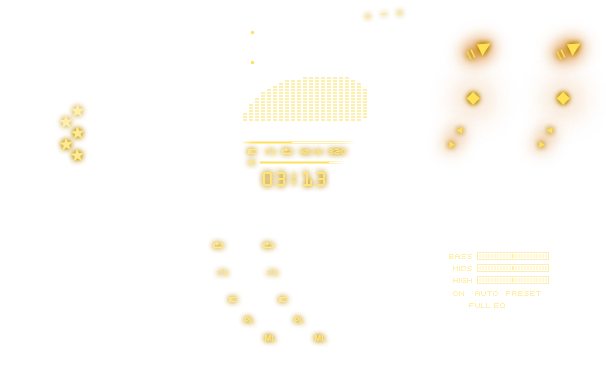
<style>
.page{position:relative;width:606px;height:375px;background:#ffffff}
.page>*{position:absolute;margin:0}
.t1{font:16.6px "Helvetica";color:#ffe98a;scale:0.65 1}
.t2{font:5.5px "Helvetica";color:#ffe98a;scale:1.41 1}
.t3{font:6px "Helvetica";color:#fbe37e}
.t4{font:6px "Helvetica";color:#fbe27d}
.t5{font:6px "Helvetica"}
.t6{font:8px "Uni0553";color:#ffe67a}
.t7{font:18px "OCRAStd";letter-spacing:0.025em;color:#ffe67a}
.t8{font:8px "Uni0553";color:#ffefac;text-transform:uppercase}
.t9{font:8px "Helvetica-Bold";color:#ffe67a}
</style>
<div class="page">
<p class="t1" style="left:380px;top:13px;width:7px;height:3px;rotate:-11deg">_</p>
<p class="t2" style="left:397px;top:10px;width:6px;height:5px;rotate:-4deg">X</p>
<p class="t3" style="left:265px;top:150px;width:4px;height:4px">3</p>
<p class="t4" style="left:269px;top:148px;width:3px;height:4px">1</p>
<p class="t5" style="left:272px;top:149px;width:4px;height:6px">2</p>
<p class="t6" style="left:300px;top:148px;width:46px;height:7px">kb/s: 320</p>
<p class="t7" style="left:263px;top:172px;width:62px;height:14px">03:13</p>
<p class="t8" style="left:449px;top:254px;width:23px;height:5px">Bass</p>
<p class="t4" style="left:221px;top:269px;width:3px;height:4px">1</p>
<p class="t5" style="left:224px;top:270px;width:4px;height:6px">2</p>
<p class="t4" style="left:271px;top:269px;width:3px;height:4px">1</p>
<p class="t5" style="left:274px;top:270px;width:4px;height:6px">2</p>
<p class="t8" style="left:453px;top:266px;width:19px;height:5px">Mids</p>
<p class="t3" style="left:217px;top:271px;width:4px;height:4px">3</p>
<p class="t3" style="left:267px;top:271px;width:4px;height:4px">3</p>
<p class="t8" style="left:453px;top:278px;width:19px;height:5px">High</p>
<p class="t8" style="left:453px;top:291px;width:11px;height:5px">On</p>
<p class="t8" style="left:475px;top:291px;width:23px;height:5px">Auto</p>
<p class="t8" style="left:506px;top:291px;width:35px;height:5px">Preset</p>
<p class="t8" style="left:469px;top:303px;width:36px;height:6px">Full EQ</p>
<p class="t9" style="left:244px;top:317px;width:11px;height:6px">PL</p>
<p class="t9" style="left:294px;top:317px;width:11px;height:6px">PL</p>
<p class="t9" style="left:264px;top:335px;width:13px;height:6px">ML</p>
<p class="t9" style="left:314px;top:335px;width:13px;height:6px">ML</p>
</div>
